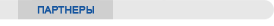
<style>
.page{position:relative;width:274px;height:26px;background:#e7e7e7}
.page>*{position:absolute;margin:0}
.t1{font:10px "ArialMT";color:#14549e;text-transform:uppercase;font-weight:bold}
</style>
<div class="page">
<p class="t1" style="left:37px;top:6px;width:57px;height:8px">Партнеры</p>
</div>
